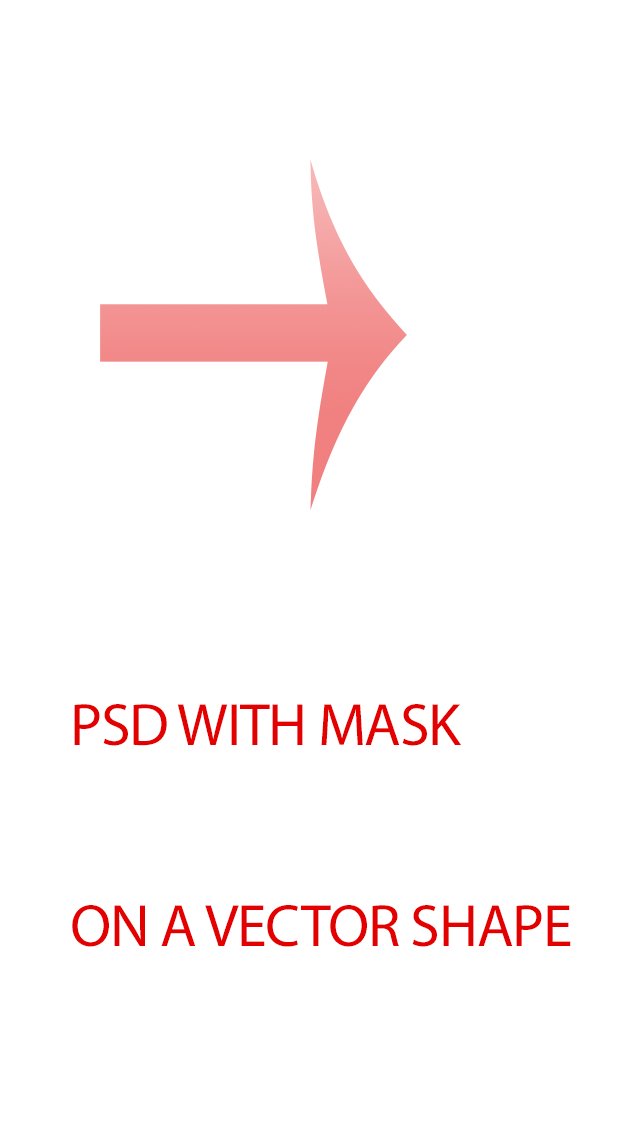
<style>
.page{position:relative;width:640px;height:1136px;background:#ffffff}
.page>*{position:absolute;margin:0}
.t1{font:60px/200.8px "MyriadPro-Regular";letter-spacing:-0.02em;color:#e30000}
</style>
<div class="page">
<p class="t1" style="left:72px;top:704px;width:499px;height:243px">PSD WITH MASK<br>ON A VECTOR SHAPE</p>
</div>
